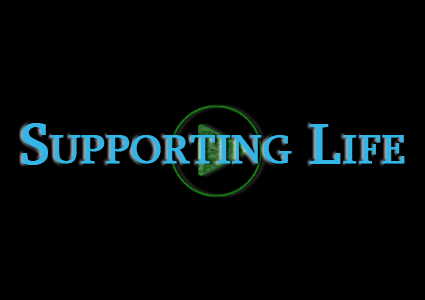
<style>
.page{position:relative;width:425px;height:300px;background:#000000}
.page>*{position:absolute;margin:0}
.t1{font:58.3px "Sylfaen";color:#33b5e5;font-variant:small-caps;font-weight:bold}
</style>
<div class="page">
<p class="t1" style="left:22px;top:123px;width:383px;height:42px">Supporting Life</p>
</div>
